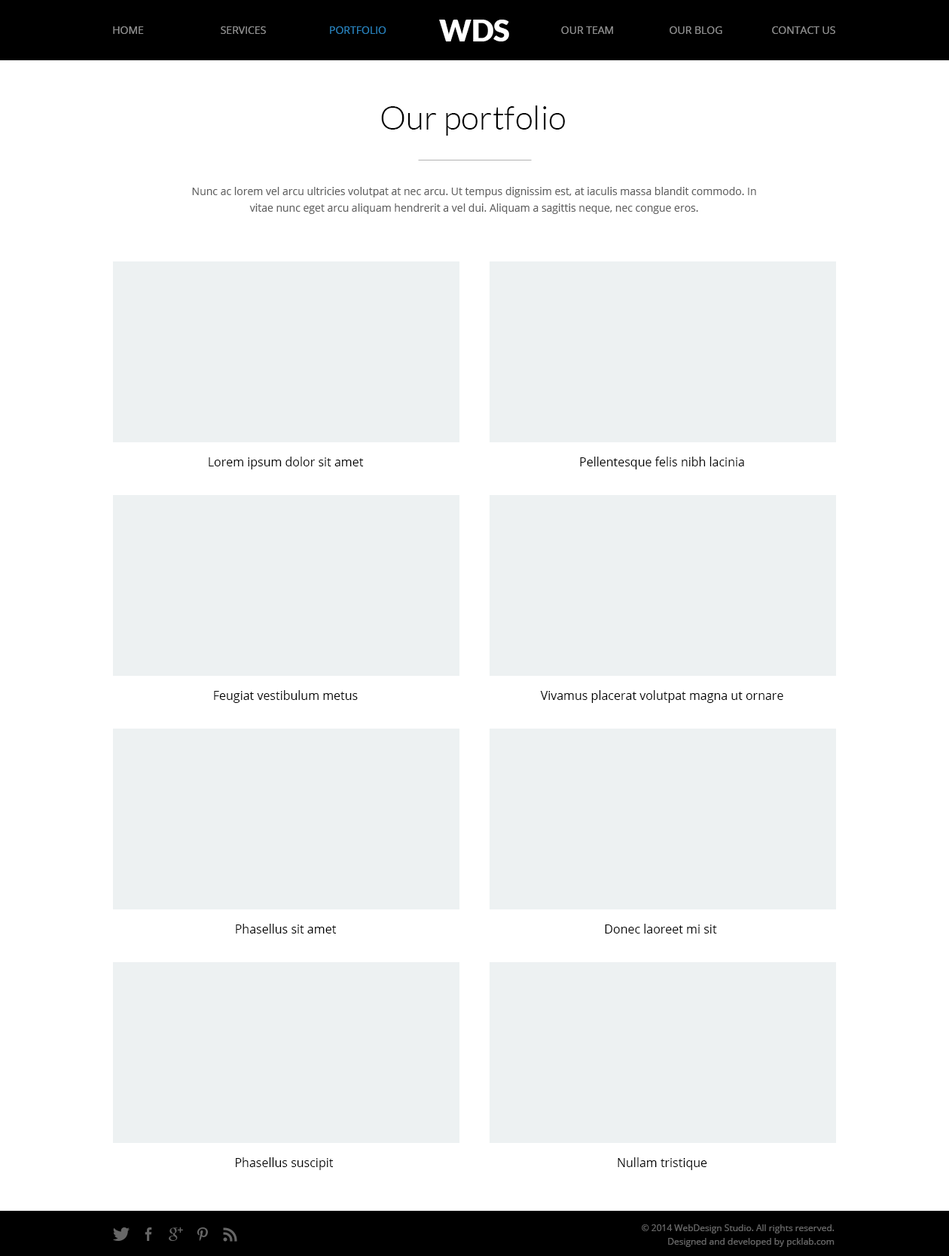
<style>
.page{position:relative;width:949px;height:1256px;background:#ffffff}
.page>*{position:absolute;margin:0}
.t1{font:10.5px "OpenSans";color:#909090;text-transform:uppercase}
.t2{font:10.5px "OpenSans";color:#2980b9;text-transform:uppercase}
.t3{font:30.1px "Lato-Black";color:#ffffff;text-transform:uppercase}
.t4{font:33.2px "Lato-Light";color:#000000}
.t5{font:10.5px/16.6px "OpenSans";color:#606060}
.t6{font:12.1px "OpenSans";color:#000000}
.t7{font:9px/13.6px "OpenSans";color:#666666}
</style>
<div class="page">
<p class="t1" style="left:113px;top:26px;width:31px;height:8px">home</p>
<p class="t1" style="left:221px;top:26px;width:45px;height:8px">services</p>
<p class="t2" style="left:330px;top:26px;width:57px;height:8px">Portfolio</p>
<p class="t3" style="left:439px;top:20px;width:70px;height:21px">WDs</p>
<p class="t1" style="left:561px;top:26px;width:52px;height:8px">our team</p>
<p class="t1" style="left:670px;top:26px;width:53px;height:8px">our blog</p>
<p class="t1" style="left:772px;top:26px;width:64px;height:8px">Contact us</p>
<p class="t4" style="left:381px;top:105px;width:184px;height:31px">Our portfolio</p>
<p class="t5" style="left:192px;top:187px;width:564px;height:27px;text-align:center">Nunc ac lorem vel arcu ultricies volutpat at nec arcu. Ut tempus dignissim est, at iaculis massa blandit commodo. In vitae nunc eget arcu aliquam hendrerit a vel dui. Aliquam a sagittis neque, nec congue eros.</p>
<p class="t6" style="left:209px;top:457px;width:155px;height:12px">Lorem ipsum dolor sit amet</p>
<p class="t6" style="left:580px;top:457px;width:164px;height:12px">Pellentesque felis nibh lacinia</p>
<p class="t6" style="left:214px;top:690px;width:144px;height:13px">Feugiat vestibulum metus</p>
<p class="t6" style="left:540px;top:690px;width:244px;height:13px">Vivamus placerat volutpat magna ut ornare</p>
<p class="t6" style="left:236px;top:924px;width:101px;height:10px">Phasellus sit amet</p>
<p class="t6" style="left:605px;top:924px;width:112px;height:10px">Donec laoreet mi sit</p>
<p class="t6" style="left:236px;top:1157px;width:98px;height:13px">Phasellus suscipit</p>
<p class="t6" style="left:618px;top:1157px;width:90px;height:13px">Nullam tristique</p>
<p class="t7" style="left:642px;top:1224px;width:193px;height:23px;text-align:right">© 2014 WebDesign Studio. All rights reserved.<br>Designed and developed by pcklab.com</p>
</div>
